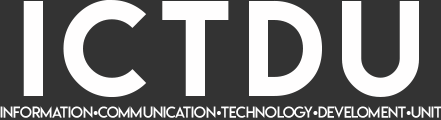
<style>
.page{position:relative;width:441px;height:120px;background:#333333}
.page>*{position:absolute;margin:0}
.t1{font:121px "LemonMilk";letter-spacing:0.1em;color:#fffefe}
.t2{font:15px "LemonMilklight";color:#ffffff}
.t3{font:15px "TimesNewRomanPSMT";color:#ffffff}
</style>
<div class="page">
<p class="t1" style="left:23px;top:0px;width:396px;height:98px">ICTDU</p>
<p class="t2" style="left:0px;top:106px;width:442px;height:12px">Information<span class="t3">•</span>COMMUNICATION<span class="t3">•</span>TECHNOLOGY<span class="t3">•</span>DEVELOMENT<span class="t3">•</span>UNIT</p>
</div>
